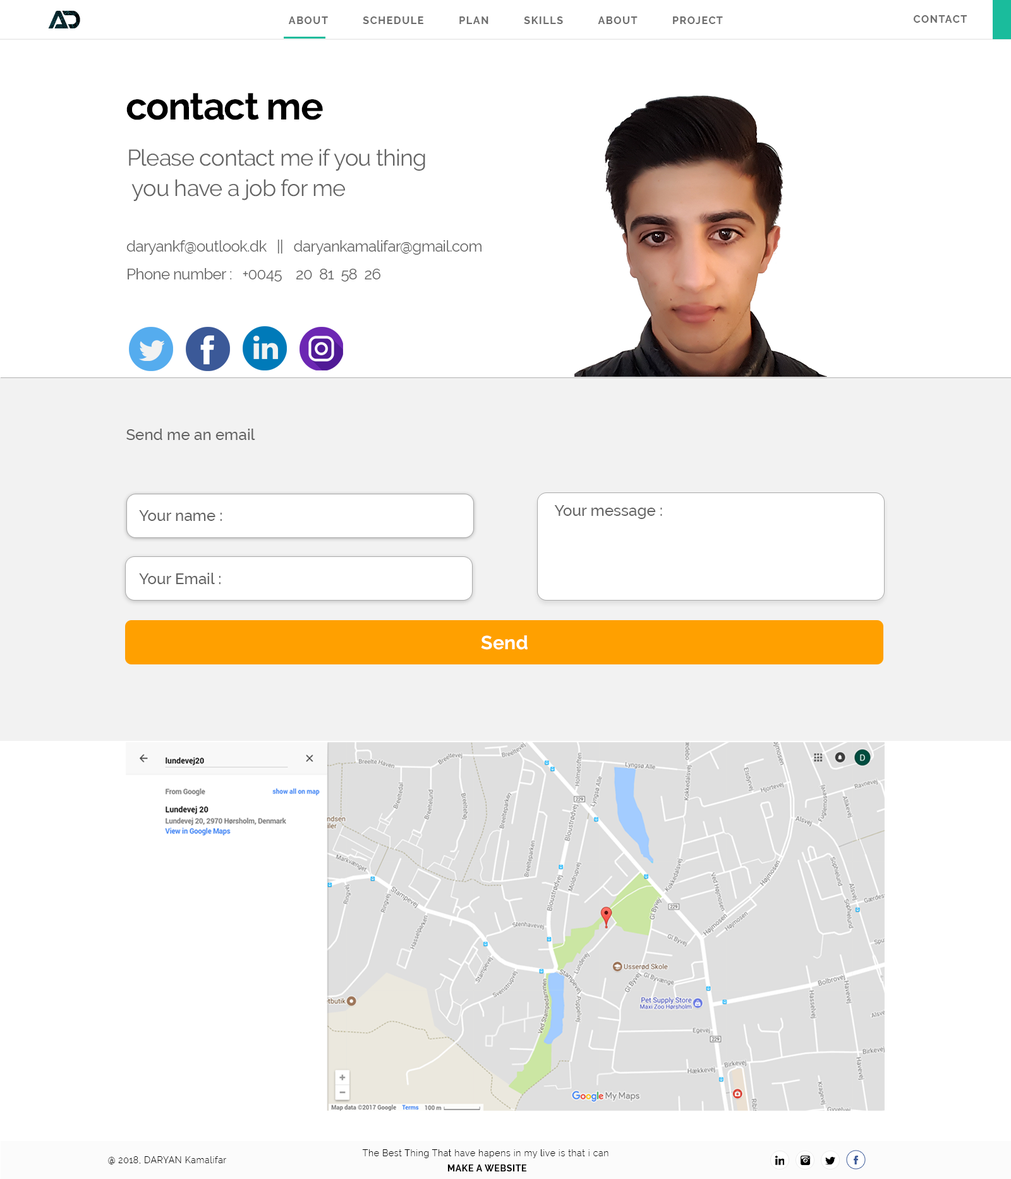
<style>
.page{position:relative;width:1011px;height:1179px;background:#ffffff}
.page>*{position:absolute;margin:0}
.t1{font:10.1px "Raleway-Bold";letter-spacing:0.1em;color:#6d6d6d;text-transform:uppercase}
.t2{font:10.1px "Raleway-Bold";letter-spacing:0.1em;color:#6d6d6d}
.t3{font:37.9px "Raleway-Bold";letter-spacing:-0.025em;color:#000000}
.t4{font:22.8px/30.3px "Raleway-Regular";letter-spacing:-0.025em;color:#646464}
.t5{font:15.2px "Raleway-Regular";letter-spacing:-0.025em;color:#646464}
.t6{font:15.2px "Raleway-Medium";letter-spacing:0.005em;color:#646464}
.t7{font:19px "Raleway-Bold";letter-spacing:0.01em;color:#ffffff}
.t8{font:8.9px "Raleway-Light";letter-spacing:0.05em;color:#000000;text-transform:uppercase}
.t9{font:8.9px "Raleway-Light";letter-spacing:0.05em;color:#000000}
.t10{font:8.9px/15.2px "Raleway-Light";letter-spacing:0.05em;color:#000000}
.t11{font:8.9px/15.2px "Raleway-Bold";letter-spacing:0.05em;color:#000000;text-transform:uppercase}
</style>
<div class="page">
<p class="t1" style="left:288px;top:16px;width:435px;height:8px">About          schedule          Plan          Skill<span class="t2">S</span>          About          project</p>
<p class="t2" style="left:913px;top:15px;width:55px;height:8px">CONTACT</p>
<p class="t3" style="left:126px;top:93px;width:197px;height:27px">contact me</p>
<p class="t4" style="left:129px;top:149px;width:296px;height:52px">Please contact me if you thing<br> you have a job for me</p>
<p class="t5" style="left:126px;top:240px;width:356px;height:15px">daryankf@outlook.dk   ||   daryankamalifar@gmail.com</p>
<p class="t5" style="left:128px;top:268px;width:253px;height:14px">Phone number :   +0045    20  81  58  26</p>
<p class="t6" style="left:126px;top:429px;width:129px;height:11px">Send me an email</p>
<p class="t6" style="left:554px;top:505px;width:108px;height:14px">Your message :</p>
<p class="t6" style="left:139px;top:510px;width:83px;height:11px">Your name :</p>
<p class="t6" style="left:139px;top:573px;width:82px;height:11px">Your Email :</p>
<p class="t7" style="left:481px;top:635px;width:47px;height:15px">Send</p>
<p class="t8" style="left:108px;top:1156px;width:118px;height:8px">@ 2018, dARYAN k<span class="t9">amalifar</span></p>
<p class="t10" style="left:362px;top:1149px;width:247px;height:22px;text-align:center">The Best Thing That have hapens in my live is that i can <br><span class="t11">Make a Website</span></p>
</div>
